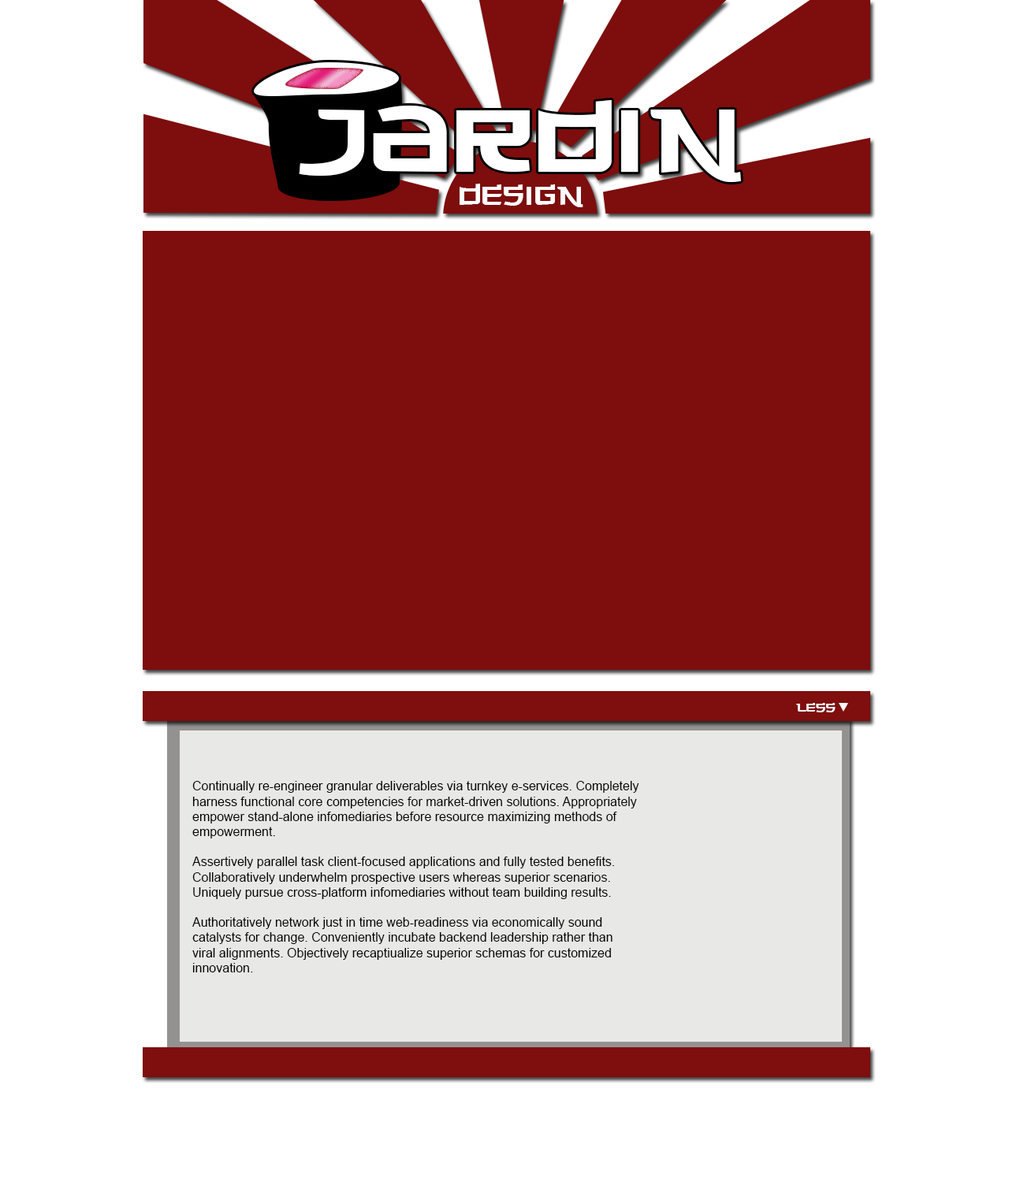
<style>
.page{position:relative;width:1009px;height:1182px;background:#ffffff}
.page>*{position:absolute;margin:0}
.t1{font:153.1px "MadeinChina";color:#ffffff}
.t2{font:43.2px "MadeinChina";color:#ffffff}
.t3{font:19.7px "MadeinChina";color:#ffffff}
.t4{font:12.6px "ArialMT";color:#000000}
</style>
<div class="page">
<p class="t1" style="left:299px;top:100px;width:442px;height:82px">Jardin</p>
<p class="t2" style="left:459px;top:184px;width:124px;height:23px">Design</p>
<p class="t3" style="left:796px;top:703px;width:39px;height:9px">less</p>
<p class="t4" style="left:192px;top:781px;width:447px;height:191px">Continually re-engineer granular deliverables via turnkey e-services. Completely harness functional core competencies for market-driven solutions. Appropriately empower stand-alone infomediaries before resource maximizing methods of empowerment. <br><br>Assertively parallel task client-focused applications and fully tested benefits. Collaboratively underwhelm prospective users whereas superior scenarios. Uniquely pursue cross-platform infomediaries without team building results. <br><br>Authoritatively network just in time web-readiness via economically sound<br>catalysts for change. Conveniently incubate backend leadership rather than viral alignments. Objectively recaptiualize superior schemas for customized innovation.</p>
</div>
